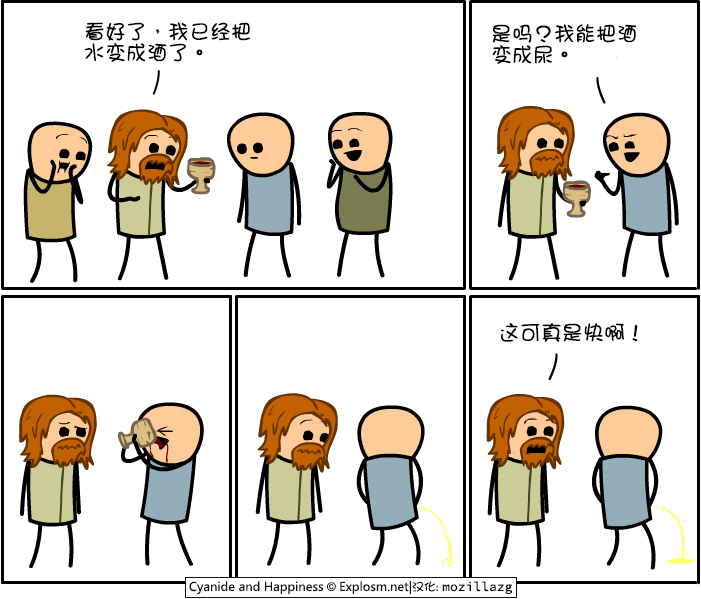
<style>
.page{position:relative;width:701px;height:599px;background:#ffffff}
.page>*{position:absolute;margin:0}
.t1{font:21px/21px "DFGirl";color:#000000}
.t2{font:21px "DFGirl";color:#000000}
</style>
<div class="page">
<p class="t1" style="left:84px;top:22px;width:167px;height:40px">看好了，我已经把<br>水变成酒了。</p>
<p class="t1" style="left:492px;top:24px;width:145px;height:40px">是吗？我能把酒<br>变成尿。</p>
<p class="t2" style="left:500px;top:323px;width:138px;height:19px">这可真是快啊！</p>
</div>
